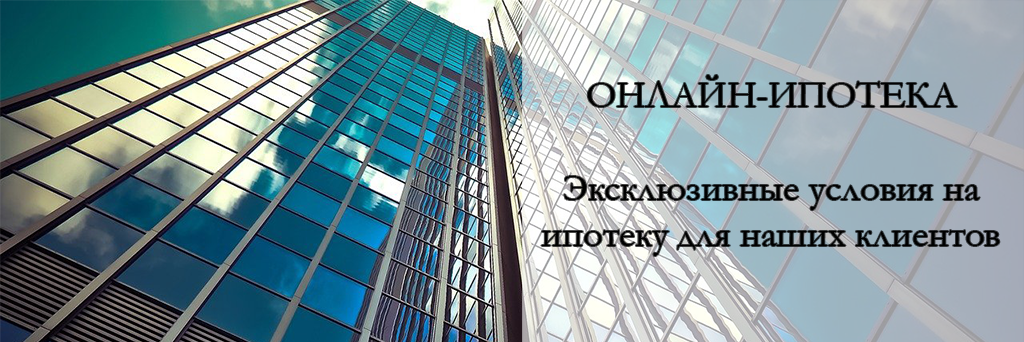
<style>
.page{position:relative;width:1024px;height:342px}
.page>*{position:absolute;margin:0}
.t1{font:38.6px "Garamond";color:#000000}
</style>
<div class="page">
<p class="t1" style="left:541px;top:75px;width:459px;height:181px;text-align:center">ОНЛАЙН-ИПОТЕКА<br><br>Эксклюзивные условия на<br>ипотеку для наших клиентов</p>
</div>
